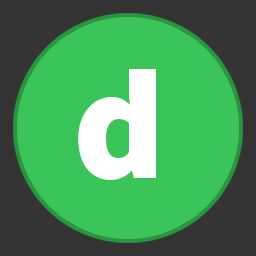
<style>
.page{position:relative;width:256px;height:256px;background:#3bc559}
.page>*{position:absolute;margin:0}
.t1{font:157.1px "SourceCodePro-Black";letter-spacing:0.06em;color:#ffffff}
</style>
<div class="page">
<p class="t1" style="left:78px;top:69px;width:78px;height:111px">d</p>
</div>
